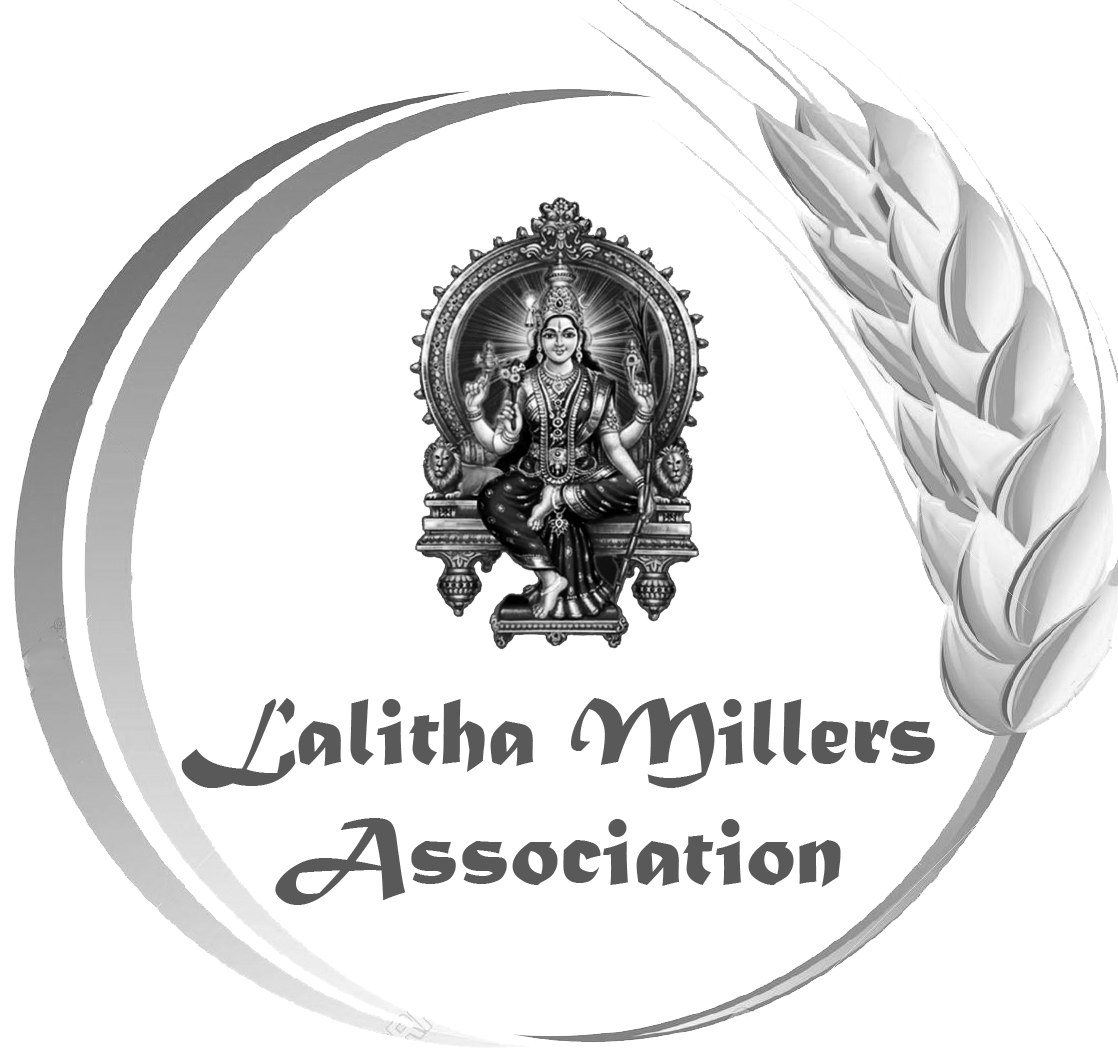
<style>
.page{position:relative;width:1118px;height:1056px;background:#ffffff}
.page>*{position:absolute;margin:0}
.t1{font:100px "MaturaMTScriptCapitals";color:#595959}
</style>
<div class="page">
<p class="t1" style="left:181px;top:698px;width:754px;height:207px;text-align:center">Lalitha Millers<br>Association</p>
</div>
